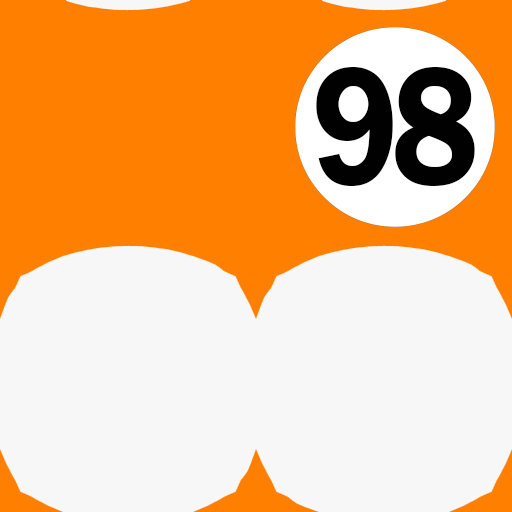
<style>
.page{position:relative;width:512px;height:512px;background:#f7f7f7}
.page>*{position:absolute;margin:0}
.t1{font:172.5px "FranklinGothic-Demi";letter-spacing:-0.05em;color:#010101;scale:0.87 1}
</style>
<div class="page">
<p class="t1" style="left:316px;top:67px;width:159px;height:119px">98</p>
</div>
